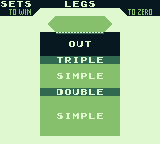
<style>
.page{position:relative;width:160px;height:144px;background:#e0f8cf}
.page>*{position:absolute;margin:0}
.t1{font:8px "Early-GameBoy";color:#e0f8cf}
.t2{font:8px/8px "Early-GameBoy";color:#e0f8cf}
</style>
<div class="page">
<p class="t1" style="left:1px;top:1px;width:30px;height:6px">sets</p>
<p class="t1" style="left:65px;top:1px;width:30px;height:6px">Legs</p>
<p class="t2" style="left:57px;top:41px;width:46px;height:78px">Out<br><br>triple<br><br>simple<br><br>double<br><br><br>simple</p>
</div>
